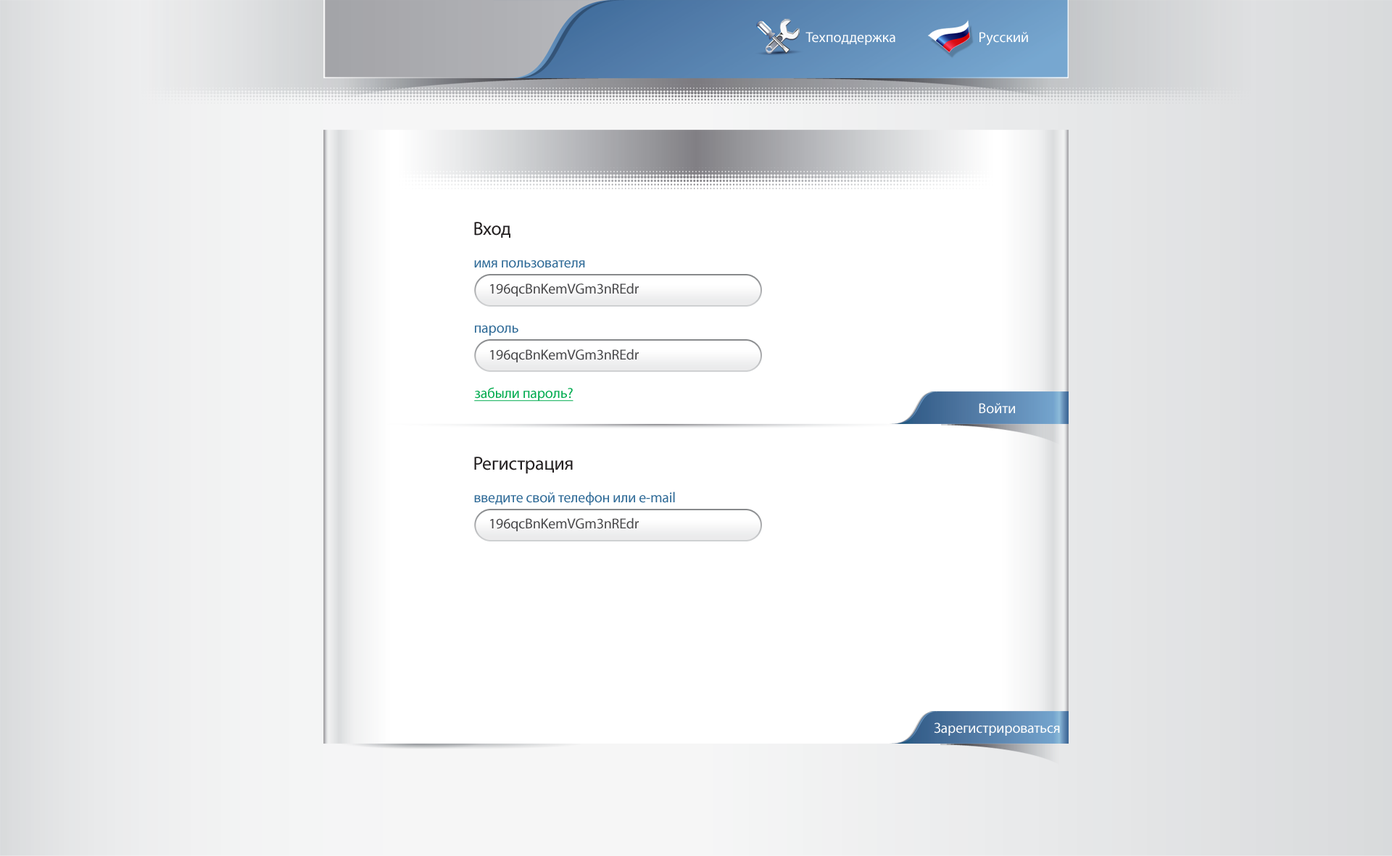
<style>
.page{position:relative;width:1392px;height:856px;background:#ffffff}
.page>*{position:absolute;margin:0}
.t1{font:14.5px "MyriadPro-Regular";color:#ffffff}
.t2{font:18.9px "MyriadPro-Regular";letter-spacing:-0.01em;color:#231f20}
.t3{font:14.5px "MyriadPro-Regular";letter-spacing:-0.01em;color:#2e6a97}
.t4{font:14.5px "MyriadPro-Regular";letter-spacing:-0.01em;color:#48484a}
.t5{font:14.5px "MyriadPro-Regular";letter-spacing:-0.01em;color:#00ab4e;text-decoration:underline}
.t6{font:14.5px "MyriadPro-Regular";letter-spacing:-0.01em;color:#ffffff}
</style>
<div class="page">
<p class="t1" style="left:806px;top:32px;width:90px;height:13px">Техподдержка</p>
<p class="t1" style="left:980px;top:32px;width:48px;height:14px">Русский</p>
<p class="t2" style="left:474px;top:222px;width:37px;height:16px">Вход</p>
<p class="t3" style="left:474px;top:260px;width:111px;height:8px">имя пользователя</p>
<p class="t4" style="left:490px;top:283px;width:149px;height:14px">196qcBnKemVGm3nREdr</p>
<p class="t3" style="left:475px;top:326px;width:43px;height:10px">пароль</p>
<p class="t4" style="left:490px;top:349px;width:149px;height:14px">196qcBnKemVGm3nREdr</p>
<p class="t5" style="left:474px;top:387px;width:100px;height:15px">забыли пароль?</p>
<p class="t1" style="left:979px;top:403px;width:36px;height:11px">Войти</p>
<p class="t2" style="left:474px;top:457px;width:99px;height:17px">Регистрация</p>
<p class="t3" style="left:474px;top:492px;width:201px;height:13px">введите свой телефон или е-mail</p>
<p class="t4" style="left:490px;top:518px;width:149px;height:14px">196qcBnKemVGm3nREdr</p>
<p class="t6" style="left:934px;top:723px;width:126px;height:13px">Зарегистрироваться</p>
</div>
